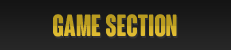
<style>
.page{position:relative;width:231px;height:50px}
.page>*{position:absolute;margin:0}
.t1{font:30px "ColunaRounded-CondensedBold"}
</style>
<div class="page">
<p class="t1" style="left:53px;top:14px;width:124px;height:23px">GAME SECTION</p>
</div>
